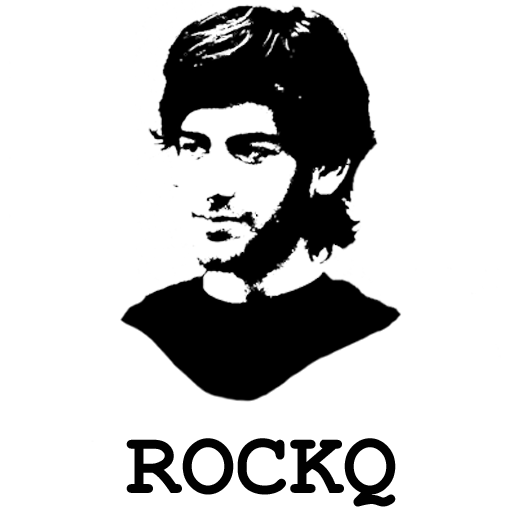
<style>
.page{position:relative;width:512px;height:512px;background:#ffffff}
.page>*{position:absolute;margin:0}
.t1{font:90px "CourierNewPS-BoldMT";color:#010101}
</style>
<div class="page">
<p class="t1" style="left:126px;top:438px;width:270px;height:69px">ROCKQ</p>
</div>
